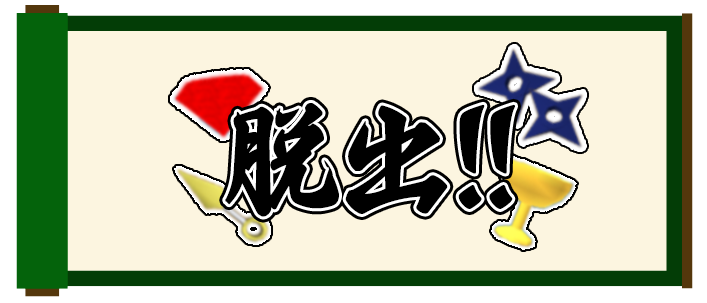
<style>
.page{position:relative;width:707px;height:303px;background:#fcf5e0}
.page>*{position:absolute;margin:0}
.t1{font:120px "TA_fuga_fude";letter-spacing:-0.075em;color:#000000;font-weight:bold}
.t2{font:160px "KazurakiSP2N-Light";letter-spacing:-0.075em;color:#000000;font-weight:bold}
</style>
<div class="page">
<p class="t1" style="left:225px;top:103px;width:290px;height:114px">脱出<span class="t2">！！</span></p>
</div>
